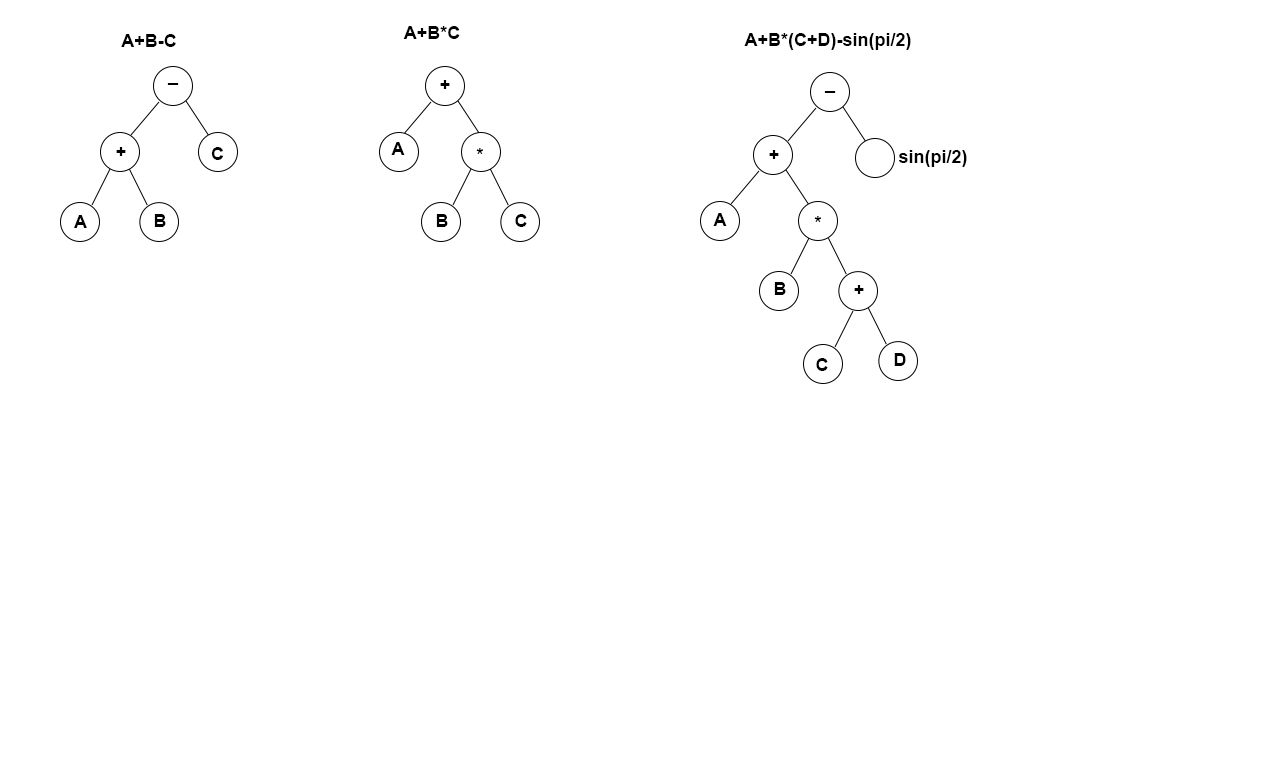
<style>
.page{position:relative;width:1280px;height:768px;background:#ffffff}
.page>*{position:absolute;margin:0}
.t1{font:18px "Arial-BoldMT";color:#000000}
</style>
<div class="page">
<p class="t1" style="left:403px;top:26px;width:57px;height:13px">A+B*C</p>
<p class="t1" style="left:121px;top:34px;width:55px;height:13px">A+B-C</p>
<p class="t1" style="left:744px;top:33px;width:167px;height:17px">A+B*(C+D)-sin(pi/2)</p>
<p class="t1" style="left:167px;top:83px;width:12px;height:2px">_</p>
<p class="t1" style="left:440px;top:80px;width:10px;height:9px">+</p>
<p class="t1" style="left:824px;top:91px;width:12px;height:2px">_</p>
<p class="t1" style="left:116px;top:147px;width:10px;height:9px">+</p>
<p class="t1" style="left:211px;top:147px;width:12px;height:13px">C</p>
<p class="t1" style="left:391px;top:142px;width:14px;height:13px">A</p>
<p class="t1" style="left:476px;top:148px;width:7px;height:6px">*</p>
<p class="t1" style="left:769px;top:150px;width:10px;height:9px">+</p>
<p class="t1" style="left:899px;top:150px;width:68px;height:17px">sin(pi/2)</p>
<p class="t1" style="left:74px;top:215px;width:13px;height:13px">A</p>
<p class="t1" style="left:154px;top:214px;width:12px;height:13px">B</p>
<p class="t1" style="left:436px;top:214px;width:12px;height:13px">B</p>
<p class="t1" style="left:515px;top:214px;width:12px;height:13px">C</p>
<p class="t1" style="left:713px;top:213px;width:14px;height:13px">A</p>
<p class="t1" style="left:814px;top:216px;width:7px;height:6px">*</p>
<p class="t1" style="left:774px;top:282px;width:12px;height:13px">B</p>
<p class="t1" style="left:854px;top:285px;width:10px;height:9px">+</p>
<p class="t1" style="left:894px;top:353px;width:12px;height:13px">D</p>
<p class="t1" style="left:816px;top:358px;width:12px;height:13px">C</p>
</div>
